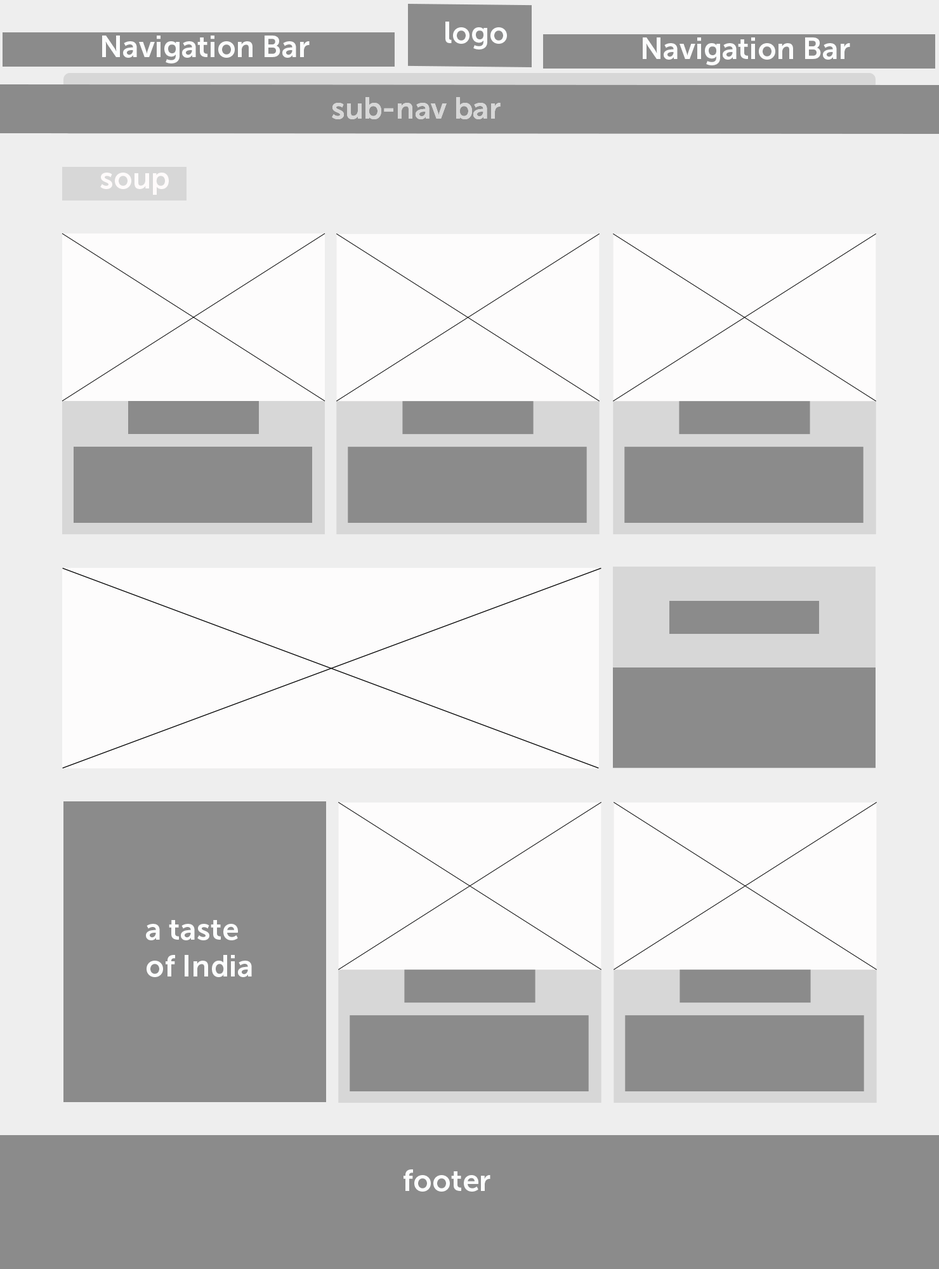
<style>
.page{position:relative;width:939px;height:1269px;background:#8b8b8b}
.page>*{position:absolute;margin:0}
.t1{font:30.5px "MuseoSans-700";color:#fcfdfd}
.t2{font:30.5px "MuseoSans-700";color:#d7d7d7}
.t3{font:30.5px "MuseoSans-700";color:#fffbfb}
</style>
<div class="page">
<p class="t1" style="left:446px;top:22px;width:61px;height:28px">logo</p>
<p class="t1" style="left:102px;top:36px;width:208px;height:27px">Navigation Bar</p>
<p class="t1" style="left:643px;top:37px;width:208px;height:28px">Navigation Bar</p>
<p class="t2" style="left:332px;top:97px;width:169px;height:22px">sub-nav bar</p>
<p class="t3" style="left:100px;top:173px;width:69px;height:22px">soup</p>
<p class="t1" style="left:146px;top:920px;width:106px;height:57px">a taste <br>of India</p>
<p class="t1" style="left:404px;top:1170px;width:87px;height:22px">footer</p>
</div>
